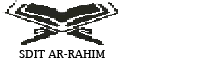
<style>
.page{position:relative;width:200px;height:60px;background:#ffffff}
.page>*{position:absolute;margin:0}
.t1{font:11px "LucidaFax";color:#010101}
</style>
<div class="page">
<p class="t1" style="left:19px;top:50px;width:86px;height:8px">SDIT AR-RAHIM</p>
</div>
